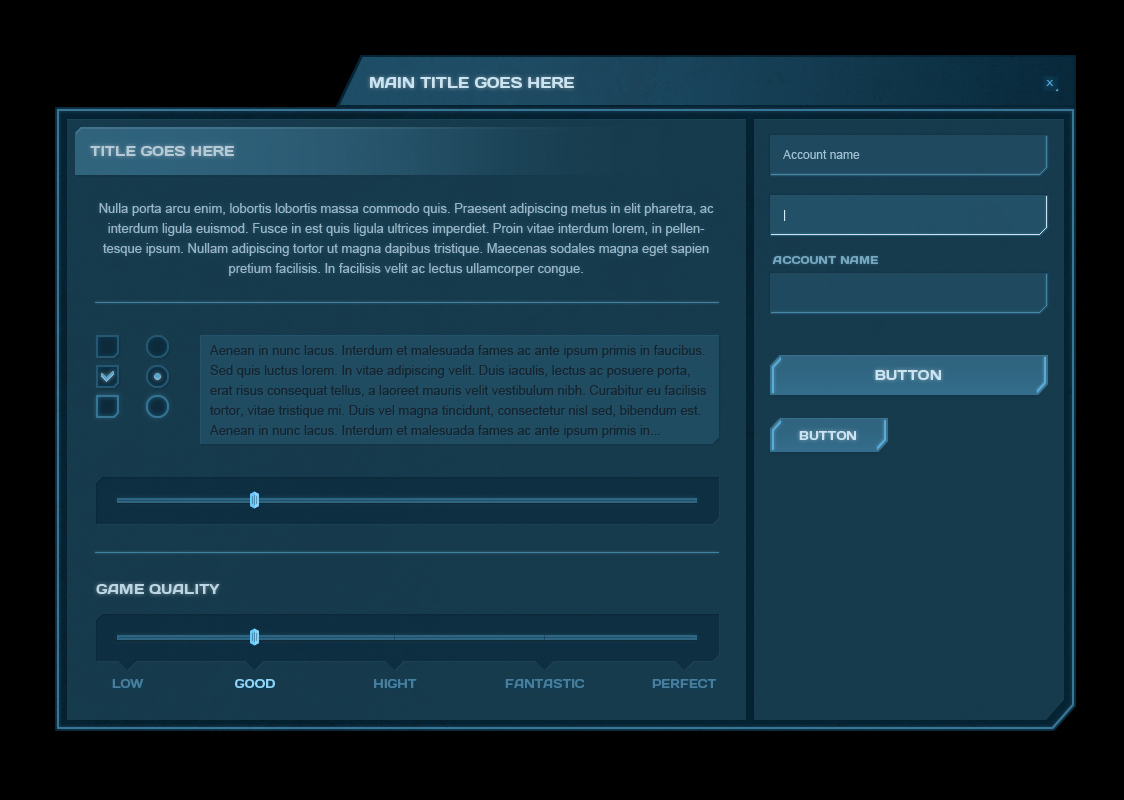
<style>
.page{position:relative;width:1124px;height:800px;background:#163b4d}
.page>*{position:absolute;margin:0}
.t1{font:15px "Days";color:#cbe3f0;text-transform:uppercase}
.t2{font:8px "ArialMT";scale:1.25 1}
.t3{font:14px "Days";color:#b5cbd7;text-transform:uppercase}
.t4{font:12px "ArialMT";color:#a1c1d2}
.t5{font:13px/20px "ArialMT";color:#9ab4c3}
.t6{font:12px "ArialMT";color:#d0eaf8}
.t7{font:11px "Days";color:#76a7be;text-transform:uppercase}
.t8{font:13px/20px "ArialMT";color:#15252f}
.t9{font:14px "Days";color:#cbe3f0;text-transform:uppercase}
.t10{font:12px "Days";color:#cbe3f0;text-transform:uppercase}
.t11{font:14px "Days";color:#bbd5e4;text-transform:uppercase}
.t12{font:12px "Days";color:#487e9b;text-transform:uppercase}
.t13{font:12px "Days";color:#8fd3f7;text-transform:uppercase}
</style>
<div class="page">
<p class="t1" style="left:370px;top:77px;width:204px;height:11px">Main Title goes here</p>
<p class="t2" style="left:1046px;top:80px;width:8px;height:6px">X</p>
<p class="t3" style="left:90px;top:146px;width:144px;height:10px">title goes here</p>
<p class="t4" style="left:783px;top:150px;width:77px;height:9px">Account name</p>
<p class="t5" style="left:99px;top:203px;width:615px;height:73px;text-align:center">Nulla porta arcu enim, lobortis lobortis massa commodo quis. Praesent adipiscing metus in elit pharetra, ac interdum ligula euismod. Fusce in est quis ligula ultrices imperdiet. Proin vitae interdum lorem, in pellentesque ipsum. Nullam adipiscing tortor ut magna dapibus tristique. Maecenas sodales magna eget sapien pretium facilisis. In facilisis velit ac lectus ullamcorper congue.</p>
<p class="t6" style="left:784px;top:210px;width:2px;height:11px">|</p>
<p class="t7" style="left:772px;top:256px;width:106px;height:8px">Account name</p>
<p class="t8" style="left:210px;top:345px;width:497px;height:93px">Aenean in nunc lacus. Interdum et malesuada fames ac ante ipsum primis in faucibus. Sed quis luctus lorem. In vitae adipiscing velit. Duis iaculis, lectus ac posuere porta, erat risus consequat tellus, a laoreet mauris velit vestibulum nibh. Curabitur eu facilisis tortor, vitae tristique mi. Duis vel magna tincidunt, consectetur nisl sed, bibendum est. Aenean in nunc lacus. Interdum et malesuada fames ac ante ipsum primis in...</p>
<p class="t9" style="left:875px;top:370px;width:66px;height:10px">button</p>
<p class="t10" style="left:799px;top:431px;width:57px;height:9px">button</p>
<p class="t11" style="left:96px;top:584px;width:124px;height:10px">Game quality</p>
<p class="t12" style="left:112px;top:679px;width:32px;height:9px">Low</p>
<p class="t13" style="left:235px;top:679px;width:40px;height:9px">Good</p>
<p class="t12" style="left:374px;top:679px;width:43px;height:9px">Hight</p>
<p class="t12" style="left:505px;top:679px;width:80px;height:9px">Fantastic</p>
<p class="t12" style="left:652px;top:679px;width:65px;height:9px">Perfect</p>
</div>
